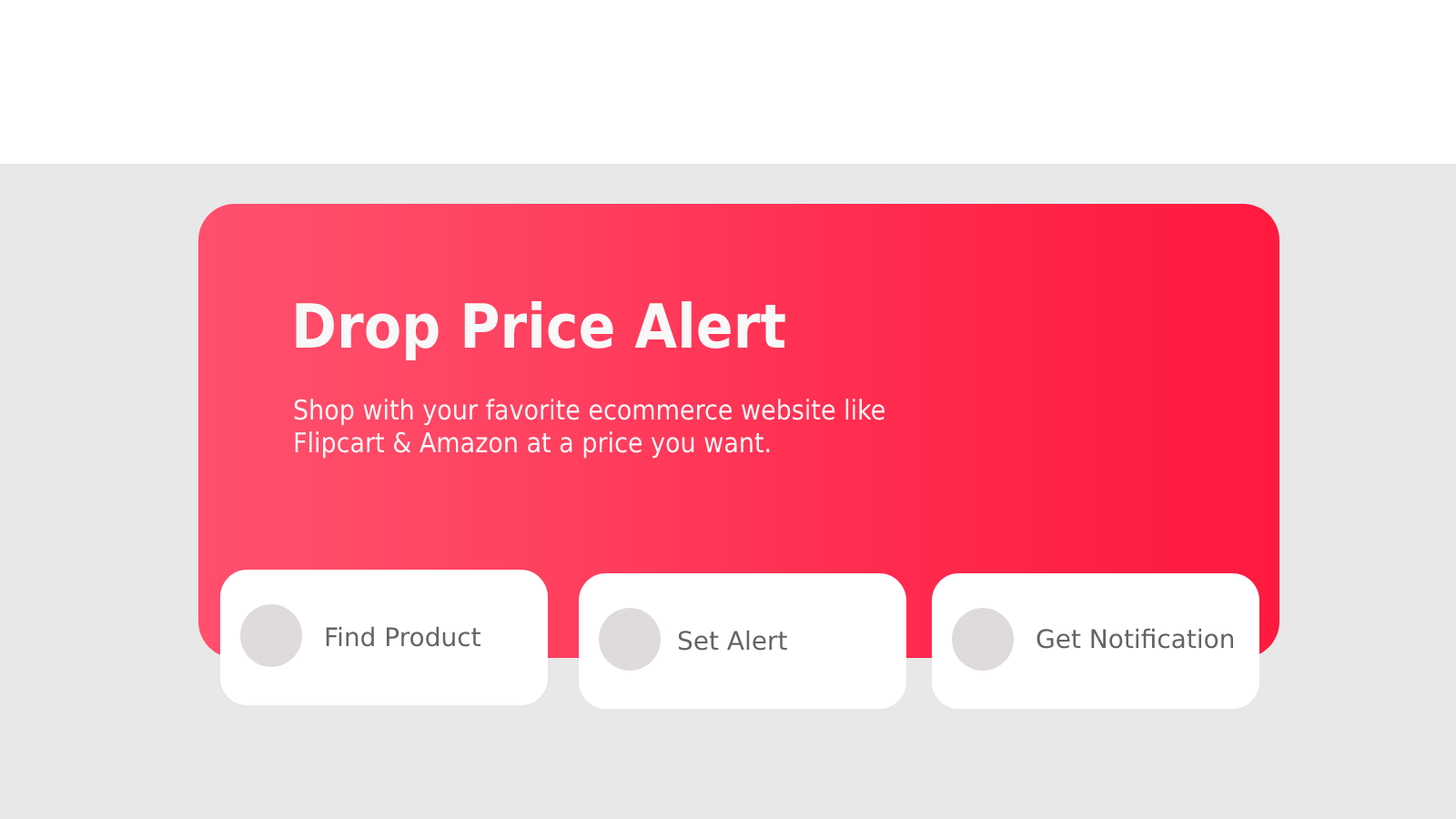
<style>
.page{position:relative;width:1456px;height:819px;background:#e8e8e9}
.page>*{position:absolute;margin:0}
.t1{font:61px "DejaVuSansCondensed-Bold";color:#f8f8f8}
.t2{font:27.3px "DejaVuSansCondensed";color:#f8f8f8}
.t3{font:25.5px "DejaVuSans";color:#656364}
</style>
<div class="page">
<p class="t1" style="left:296px;top:301px;width:489px;height:59px">Drop Price Alert</p>
<p class="t2" style="left:294px;top:399px;width:591px;height:60px">Shop with your favorite ecommerce website like Flipcart &amp; Amazon at a price you want.</p>
<p class="t3" style="left:326px;top:626px;width:154px;height:21px">Find Product</p>
<p class="t3" style="left:678px;top:630px;width:109px;height:21px">Set Alert</p>
<p class="t3" style="left:1036px;top:628px;width:198px;height:21px">Get Notification</p>
</div>
